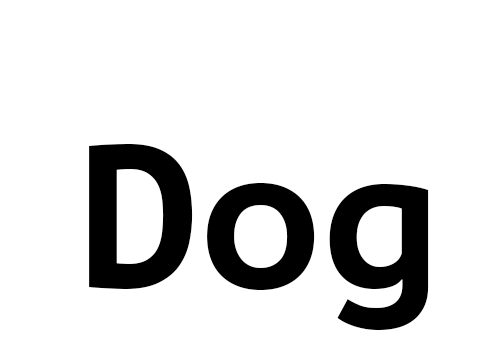
<style>
.page{position:relative;width:504px;height:360px;background:#ffffff}
.page>*{position:absolute;margin:0}
.t1{font:202px "PTMono-Bold";color:#000000}
</style>
<div class="page">
<p class="t1" style="left:89px;top:144px;width:340px;height:186px">Dog</p>
</div>
